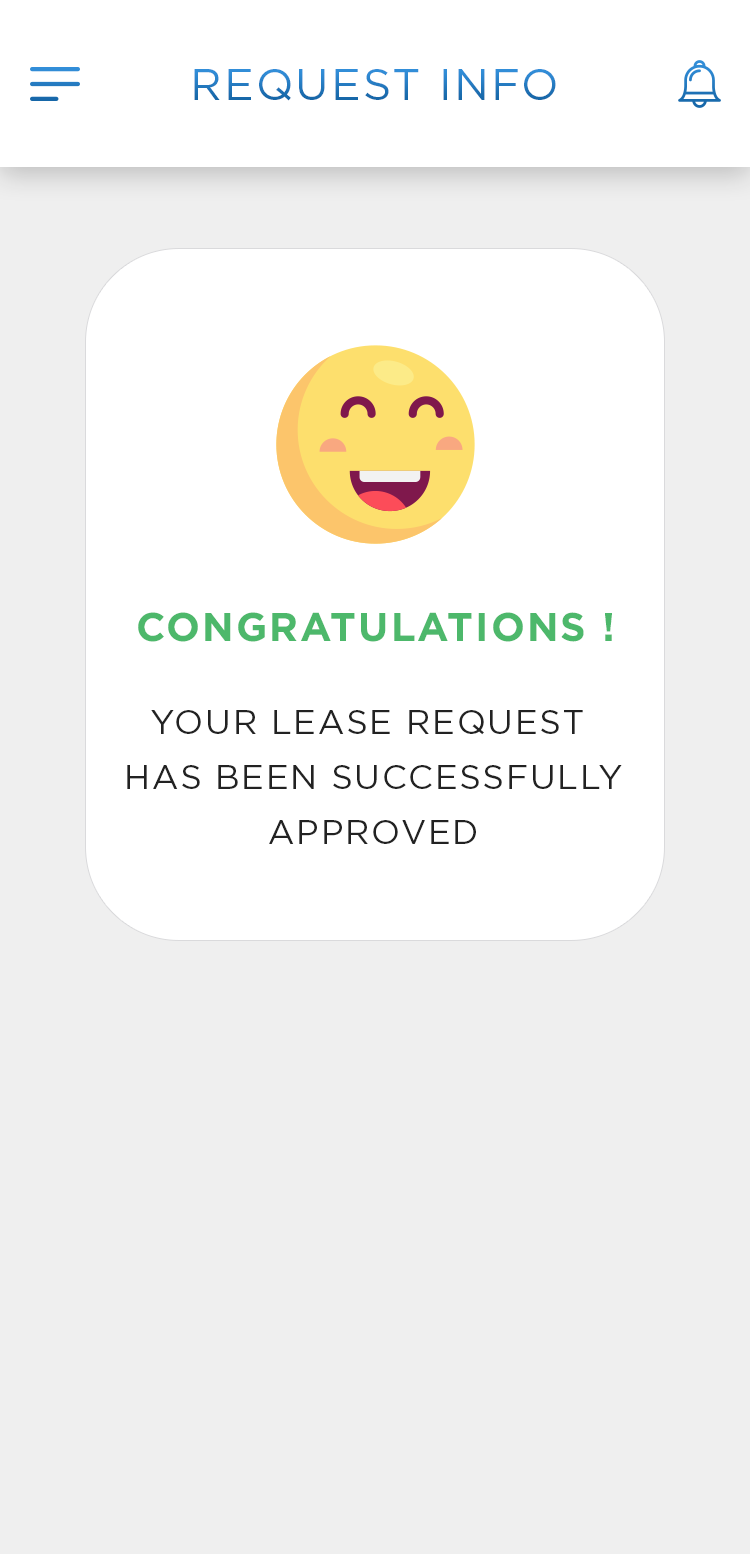
<style>
.page{position:relative;width:750px;height:1554px;background:#efefef}
.page>*{position:absolute;margin:0}
.t1{font:44px "Gotham-Book";letter-spacing:0.05em;text-transform:uppercase}
.t2{font:40px "Gotham-Bold";letter-spacing:0.05em;color:#4db86b;text-transform:uppercase}
.t3{font:34px/55px "Gotham-Book";letter-spacing:0.05em;color:#222222;text-transform:uppercase}
</style>
<div class="page">
<p class="t1" style="left:194px;top:69px;width:362px;height:32px">REQUEST INFO</p>
<p class="t2" style="left:138px;top:612px;width:474px;height:30px">Congratulations !</p>
<p class="t3" style="left:127px;top:710px;width:495px;height:134px;text-align:center">Your lease request<br> has been successfully<br> approved</p>
</div>
